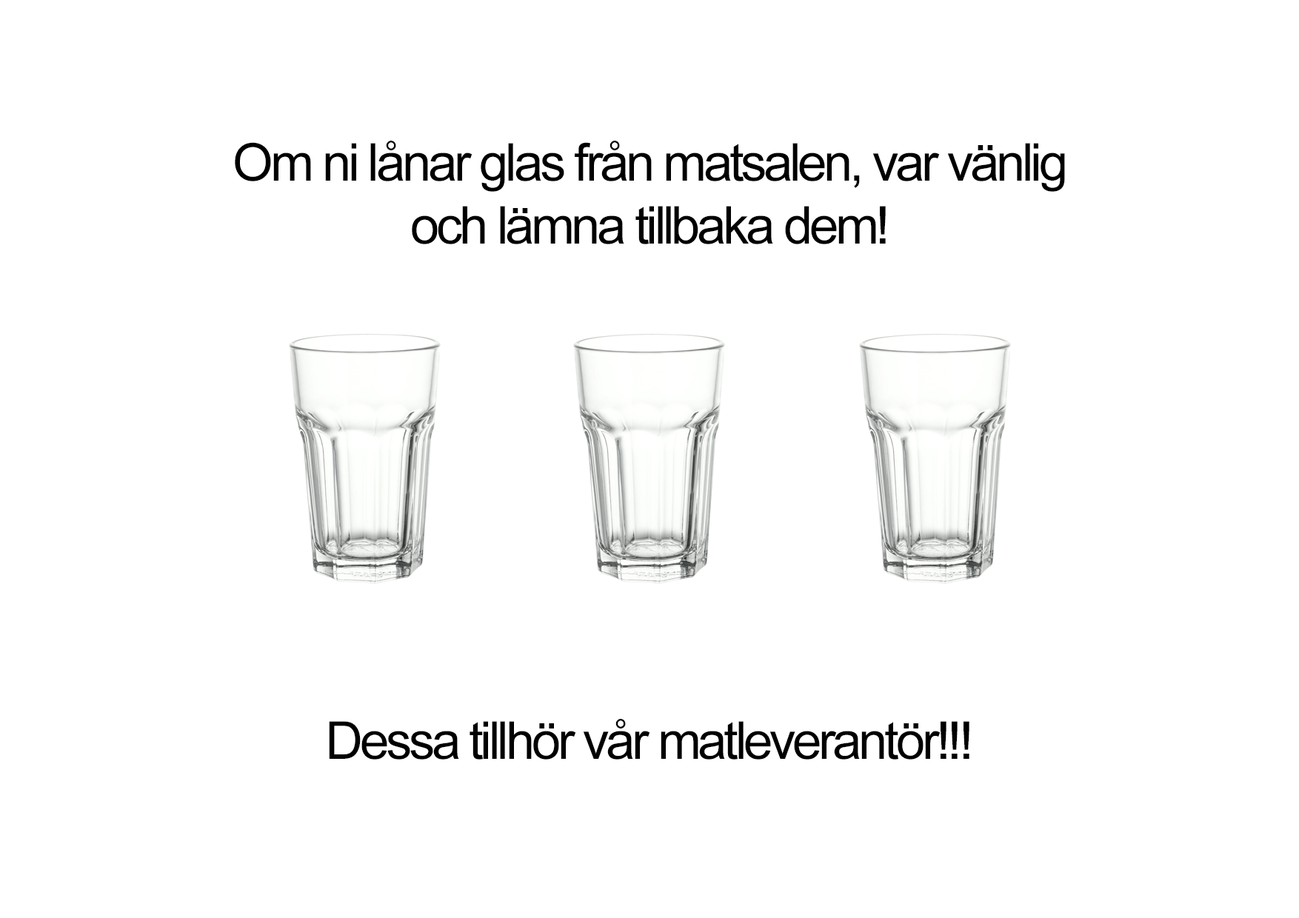
<style>
.page{position:relative;width:1299px;height:918px;background:#ffffff}
.page>*{position:absolute;margin:0}
.t1{font:52.2px "ArialMT";letter-spacing:-0.06em;color:#000000}
</style>
<div class="page">
<p class="t1" style="left:235px;top:141px;width:830px;height:103px;text-align:center">Om ni lånar glas från matsalen, var vänlig<br>och lämna tillbaka dem!</p>
<p class="t1" style="left:329px;top:719px;width:640px;height:41px">Dessa tillhör vår matleverantör!!!</p>
</div>
